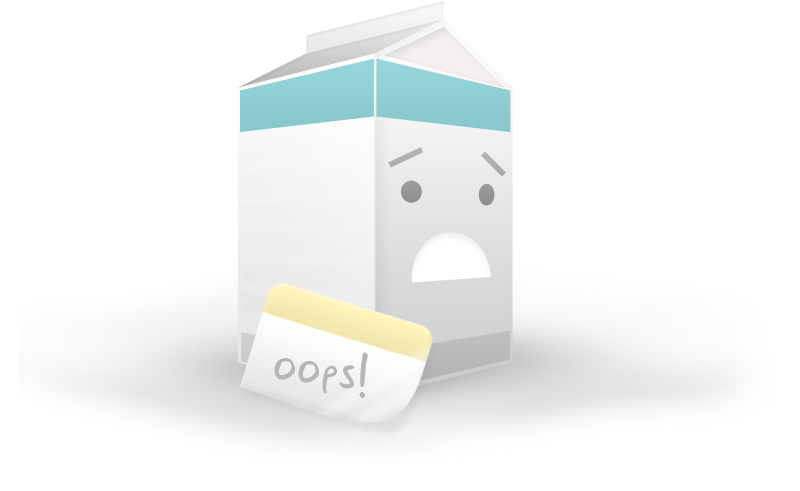
<style>
.page{position:relative;width:800px;height:491px;background:#ffffff}
.page>*{position:absolute;margin:0}
.t1{font:41.6px "JoseFernandez";letter-spacing:0.075em;color:#b6b6b6}
</style>
<div class="page">
<p class="t1" style="left:274px;top:352px;width:94px;height:46px;rotate:8deg">oops!</p>
</div>
